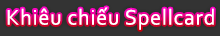
<style>
.page{position:relative;width:220px;height:36px;background:#333333}
.page>*{position:absolute;margin:0}
.t1{font:22px "Corbel";letter-spacing:0.035em;color:#ffffff}
</style>
<div class="page">
<p class="t1" style="left:7px;top:7px;width:207px;height:23px">Khiêu chiếu Spellcard</p>
</div>
